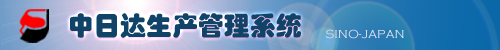
<style>
.page{position:relative;width:500px;height:50px}
.page>*{position:absolute;margin:0}
.t1{font:26px "STHupo";color:#0f4468}
.t2{font:12px "CopperplateGothic-Light";color:#dadbee}
</style>
<div class="page">
<p class="t1" style="left:70px;top:13px;width:231px;height:25px">中日达生产管理系统</p>
<p class="t2" style="left:325px;top:29px;width:79px;height:10px">SINO-JAPAN</p>
</div>
